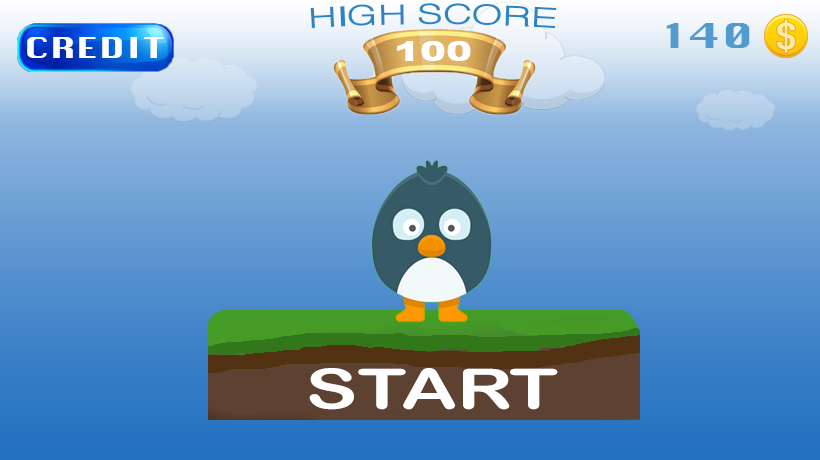
<style>
.page{position:relative;width:820px;height:460px}
.page>*{position:absolute;margin:0}
.t1{font:27.8px "Helvetica";color:#2b86c5;scale:1.4 1}
.t2{font:33.3px "Krungthep";color:#529bcf;scale:1.4 1}
.t3{font:27.8px "Krungthep";color:#ffffff;scale:1.4 1}
.t4{font:27.8px "Arial-Black";color:#ffffff;scale:1.4 1}
.t5{font:55.6px "ArialRoundedMTBold";color:#ffffff;scale:1.4 1}
</style>
<div class="page">
<p class="t1" style="left:310px;top:3px;width:247px;height:26px">HIGH SCORE</p>
<p class="t2" style="left:666px;top:23px;width:84px;height:25px">140</p>
<p class="t3" style="left:27px;top:37px;width:137px;height:21px">CREDIT</p>
<p class="t4" style="left:397px;top:41px;width:74px;height:20px">100</p>
<p class="t5" style="left:309px;top:368px;width:249px;height:42px">START</p>
</div>
